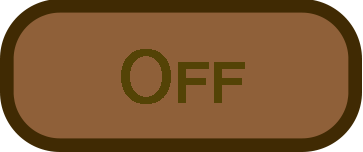
<style>
.page{position:relative;width:363px;height:152px;background:#8f6039}
.page>*{position:absolute;margin:0}
.t1{font:72px "ArialMT";letter-spacing:-0.025em;color:#544306;font-variant:small-caps;font-weight:bold}
</style>
<div class="page">
<p class="t1" style="left:121px;top:49px;width:124px;height:55px">Off</p>
</div>
